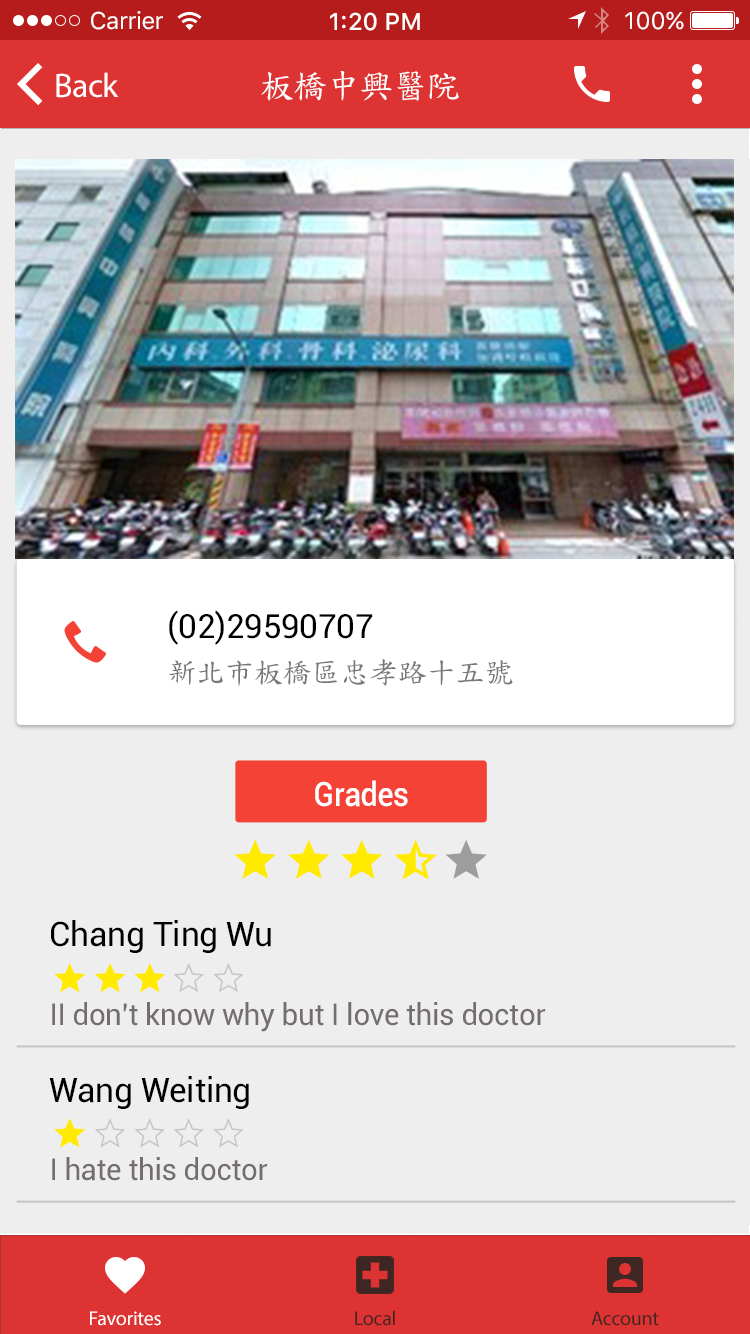
<style>
.page{position:relative;width:750px;height:1334px;background:#eeeeee}
.page>*{position:absolute;margin:0}
.t1{font:24px "SFUIText-Regular";letter-spacing:-0.025em;color:#ffffff}
.t2{font:24px "SFUIText-Medium";color:#ffffff}
.t3{font:24px "SFUIText-Regular";color:#ffffff}
.t4{font:34px "MyriadPro-Regular";letter-spacing:-0.024em;color:#ffffff}
.t5{font:34px "DFKaiShu-SB-Estd-BF";letter-spacing:-0.024em;color:#ffffff}
.t6{font:33.3px "Roboto-Regular";letter-spacing:-0.01em;color:#000000}
.t7{font:29.1px "DFKaiShu-SB-Estd-BF";letter-spacing:-0.01em;color:#777777}
.t8{font:33.4px "Roboto-Medium";letter-spacing:-0.01em;color:#ffffff;scale:0.91 1}
.t9{font:33.9px "Roboto-Regular";letter-spacing:-0.01em;color:#000000}
.t10{font:29.7px "Roboto-Regular";letter-spacing:-0.01em;color:#736d6d}
.t11{font:20px "MyriadPro-Regular";letter-spacing:-0.01em;color:#ffffff}
.t12{font:20px "MyriadPro-Regular";letter-spacing:-0.01em;color:#3e2723}
</style>
<div class="page">
<p class="t1" style="left:91px;top:11px;width:72px;height:19px">Carrier</p>
<p class="t2" style="left:330px;top:12px;width:90px;height:19px">1:20 PM</p>
<p class="t3" style="left:625px;top:11px;width:59px;height:19px">100%</p>
<p class="t4" style="left:56px;top:72px;width:63px;height:26px">Back</p>
<p class="t5" style="left:261px;top:71px;width:198px;height:30px">板橋中興醫院</p>
<p class="t6" style="left:169px;top:610px;width:204px;height:35px">(02)29590707</p>
<p class="t7" style="left:169px;top:659px;width:344px;height:27px">新北市板橋區忠孝路十五號</p>
<p class="t8" style="left:315px;top:780px;width:93px;height:27px">Grades</p>
<p class="t9" style="left:51px;top:920px;width:220px;height:33px">Chang Ting Wu</p>
<p class="t10" style="left:52px;top:1002px;width:494px;height:30px">II don’t know why but I love this doctor</p>
<p class="t9" style="left:49px;top:1076px;width:200px;height:33px">Wang Weiting</p>
<p class="t10" style="left:52px;top:1157px;width:216px;height:24px">I hate this doctor</p>
<p class="t11" style="left:90px;top:1311px;width:71px;height:15px">Favorites</p>
<p class="t12" style="left:355px;top:1310px;width:40px;height:16px">Local</p>
<p class="t12" style="left:591px;top:1311px;width:68px;height:15px">Account</p>
</div>
